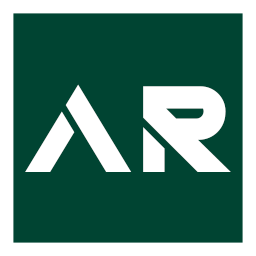
<style>
.page{position:relative;width:256px;height:256px;background:#004432}
.page>*{position:absolute;margin:0}
.t1{font:124.7px "QuantumRegular";color:#ffffff}
</style>
<div class="page">
<p class="t1" style="left:25px;top:84px;width:206px;height:88px">AR</p>
</div>
